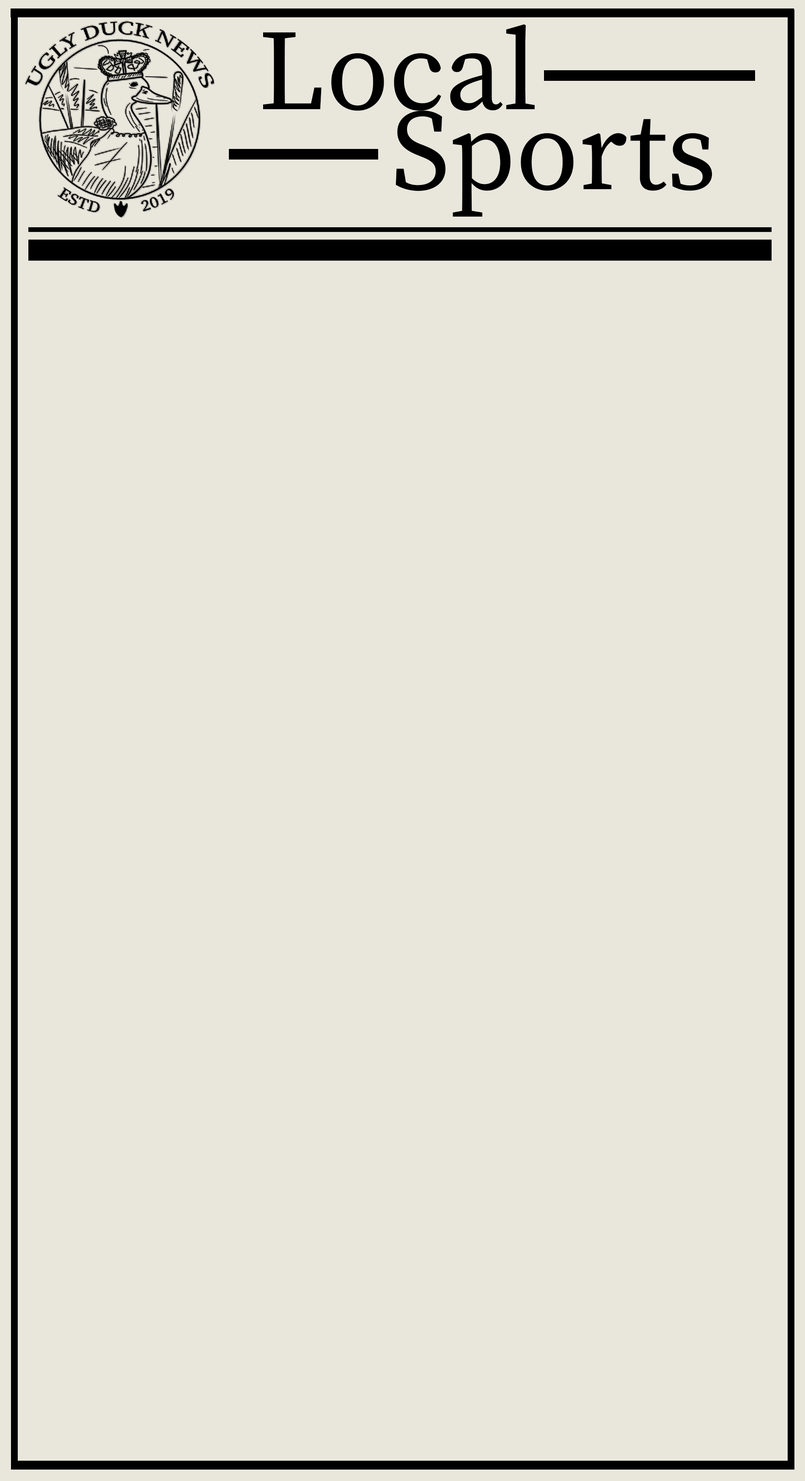
<style>
.page{position:relative;width:805px;height:1481px;background:#e9e7dc}
.page>*{position:absolute;margin:0}
.t1{font:114.8px/79.7px "SourceSerifRoman-Regular";color:#000000}
</style>
<div class="page">
<p class="t1" style="left:263px;top:24px;width:450px;height:193px">Local<br>     Sports</p>
</div>
